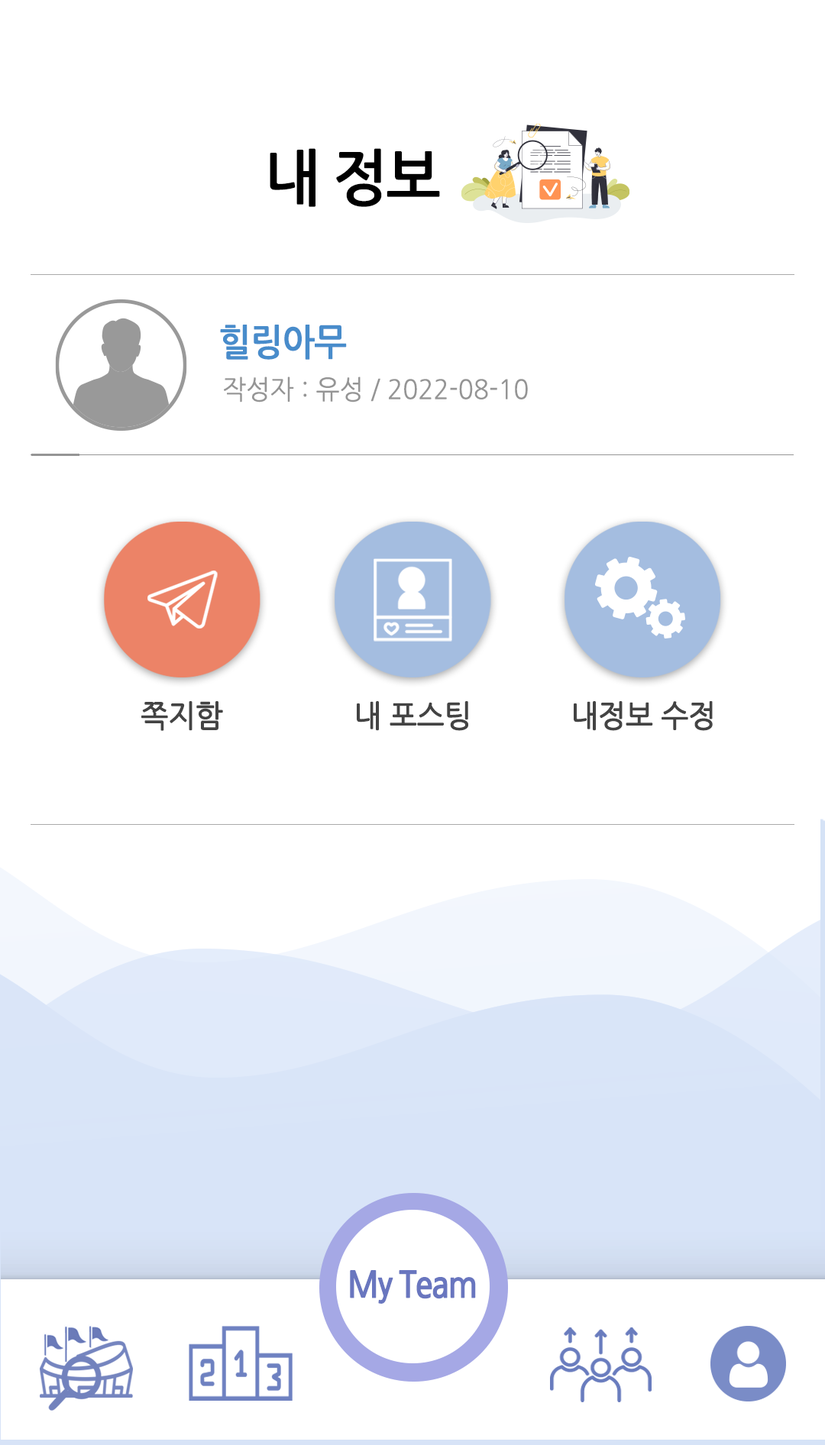
<style>
.page{position:relative;width:825px;height:1445px;background:#ffffff}
.page>*{position:absolute;margin:0}
.t1{font:61.1px "NanumGothicBold";letter-spacing:-0.025em;color:#000000;scale:0.95 1}
.t2{font:36.7px "NanumGothicBold";letter-spacing:-0.025em;color:#488ccb;scale:0.95 1}
.t3{font:26.7px "NanumGothic";color:#959595;scale:0.95 1}
.t4{font:30.6px "NanumGothic";letter-spacing:-0.025em;color:#434343;font-weight:bold;scale:0.95 1}
</style>
<div class="page">
<p class="t1" style="left:270px;top:148px;width:170px;height:59px">내 정보</p>
<p class="t2" style="left:220px;top:325px;width:127px;height:35px">힐링아무</p>
<p class="t3" style="left:224px;top:377px;width:304px;height:26px">작성자 : 유성 / 2022-08-10</p>
<p class="t4" style="left:141px;top:701px;width:82px;height:30px">쪽지함</p>
<p class="t4" style="left:357px;top:701px;width:111px;height:30px">내 포스팅</p>
<p class="t4" style="left:574px;top:701px;width:139px;height:30px">내정보 수정</p>
</div>
